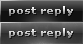
<style>
.page{position:relative;width:83px;height:44px}
.page>*{position:absolute;margin:0}
.t1{font:10px "Verdana-Bold";scale:1.1 1}
</style>
<div class="page">
<p class="t1" style="left:9px;top:6px;width:64px;height:10px">post reply</p>
<p class="t1" style="left:9px;top:28px;width:64px;height:10px">post reply</p>
</div>
